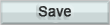
<style>
.page{position:relative;width:110px;height:25px;background:#cbd7d7}
.page>*{position:absolute;margin:0}
.t1{font:14px "ArialMT";color:#2c2e2e;font-weight:bold}
</style>
<div class="page">
<p class="t1" style="left:38px;top:6px;width:34px;height:11px">Save</p>
</div>
